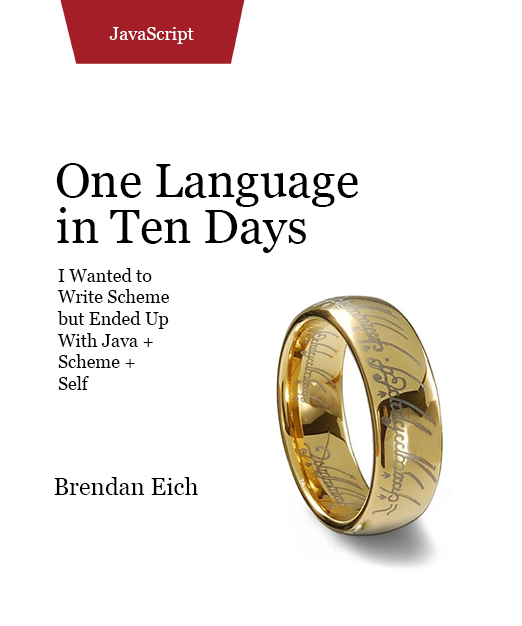
<style>
.page{position:relative;width:522px;height:626px;background:#ffffff}
.page>*{position:absolute;margin:0}
.t1{font:18px "Georgia";color:#ffffff}
.t2{font:48px "Georgia";color:#000000}
.t3{font:18px "Georgia";color:#000000}
.t4{font:24px "Georgia";color:#000000}
</style>
<div class="page">
<p class="t1" style="left:109px;top:27px;width:85px;height:17px">JavaScript</p>
<p class="t2" style="left:56px;top:163px;width:303px;height:44px">One Language</p>
<p class="t2" style="left:57px;top:207px;width:249px;height:46px">in Ten Days</p>
<p class="t3" style="left:57px;top:268px;width:112px;height:122px">I Wanted to<br>Write Scheme<br>but Ended Up<br>With Java +<br>Scheme +<br>Self</p>
<p class="t4" style="left:54px;top:477px;width:144px;height:18px">Brendan Eich</p>
</div>
